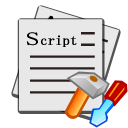
<style>
.page{position:relative;width:128px;height:128px;background:#ffffff}
.page>*{position:absolute;margin:0}
.t1{font:14px "SimSun";color:#010101;font-weight:bold}
.t2{font:18px "SimSun";color:#010101;text-transform:uppercase;font-weight:bold;scale:1.5 1}
</style>
<div class="page">
<p class="t1" style="left:26px;top:32px;width:51px;height:15px"><span class="t2">S</span>cript</p>
</div>
